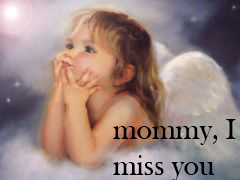
<style>
.page{position:relative;width:240px;height:180px}
.page>*{position:absolute;margin:0}
.t1{font:30px "BaskOldFace";letter-spacing:-0.01em;color:#000000}
</style>
<div class="page">
<p class="t1" style="left:113px;top:119px;width:123px;height:62px">mommy, I<br>miss you</p>
</div>
